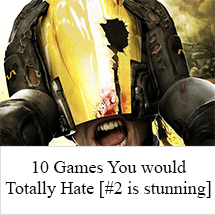
<style>
.page{position:relative;width:215px;height:215px;background:#ffffff}
.page>*{position:absolute;margin:0}
.t1{font:18px "TimesNewRomanPSMT";color:#070707}
</style>
<div class="page">
<p class="t1" style="left:5px;top:160px;width:206px;height:38px;text-align:center">10 Games You would<br>Totally Hate [#2 is stunning]</p>
</div>
